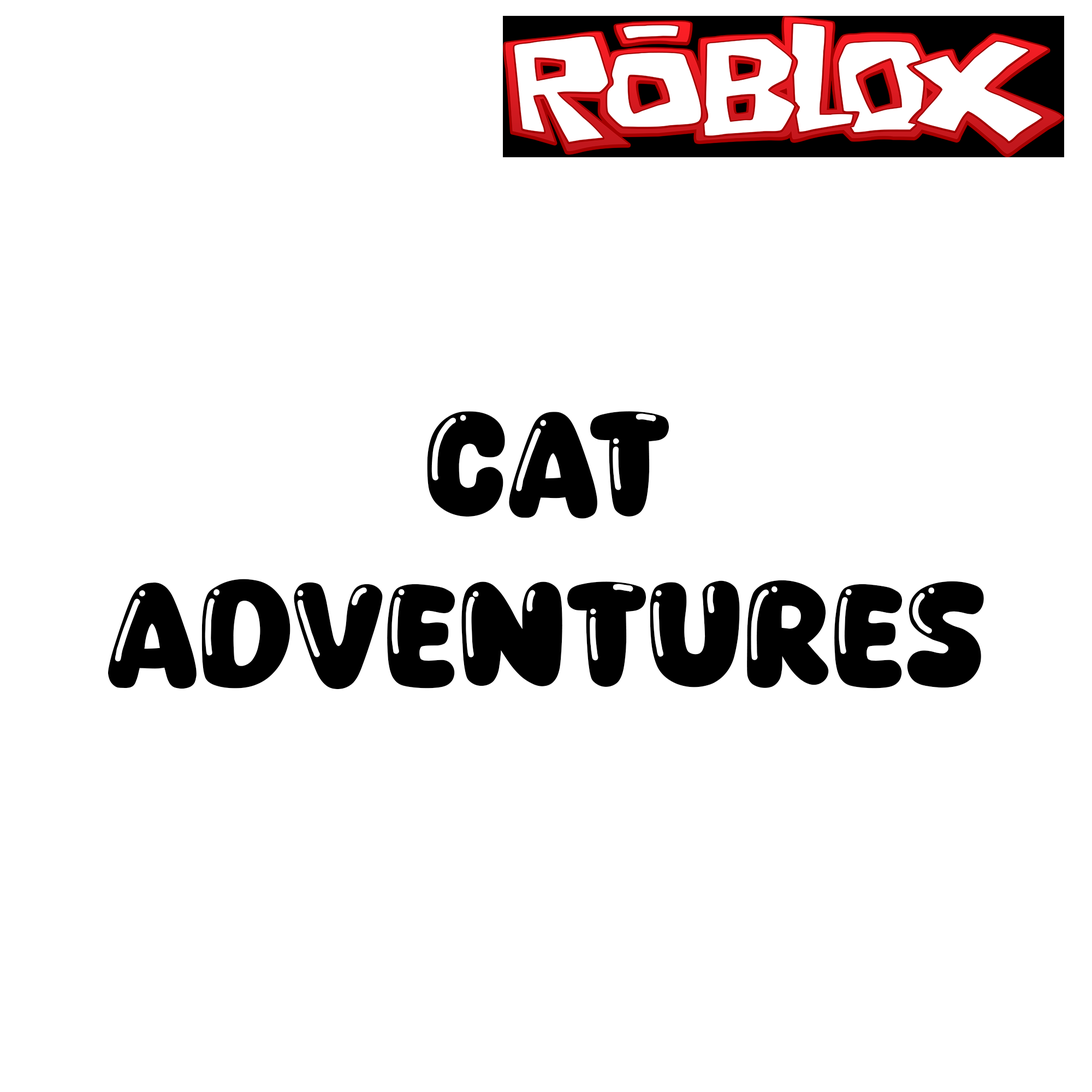
<style>
.page{position:relative;width:1092px;height:1092px;background:#ffffff}
.page>*{position:absolute;margin:0}
.t1{font:142px "Copyduck";color:#000000}
</style>
<div class="page">
<p class="t1" style="left:108px;top:411px;width:876px;height:279px;text-align:center">Cat <br>Adventures</p>
</div>
